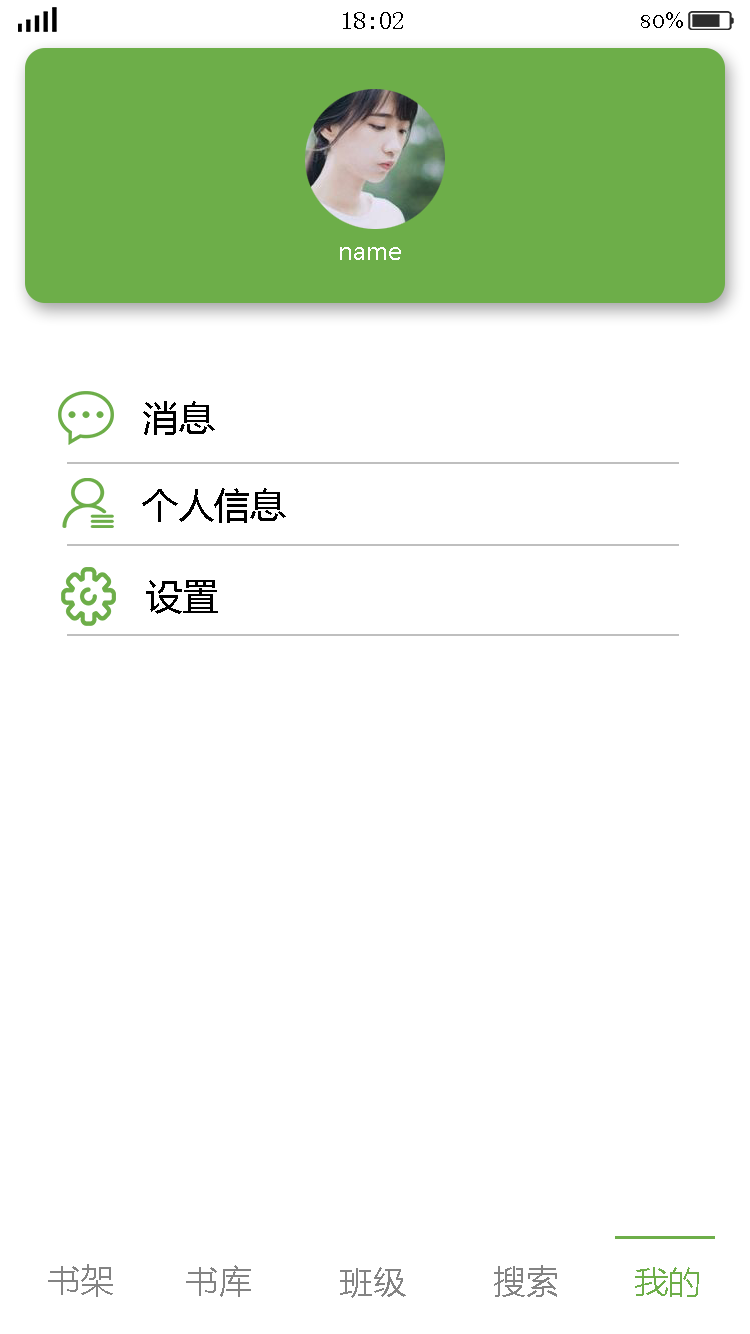
<style>
.page{position:relative;width:750px;height:1334px;background:#ffffff}
.page>*{position:absolute;margin:0}
.t1{font:25px "SimSun";color:#000000}
.t2{font:25px "BellMT";color:#000000}
.t3{font:24px "MicrosoftYaHei";color:#ffffff}
.t4{font:36px "MicrosoftYaHei";color:#000000}
.t5{font:33.3px "MicrosoftYaHei";color:#838383}
.t6{font:33.3px "MicrosoftYaHei";color:#6dae49}
</style>
<div class="page">
<p class="t1" style="left:343px;top:12px;width:60px;height:17px">18:02</p>
<p class="t2" style="left:641px;top:12px;width:42px;height:16px">80%</p>
<p class="t3" style="left:340px;top:247px;width:61px;height:13px">name</p>
<p class="t4" style="left:143px;top:401px;width:72px;height:34px">消息</p>
<p class="t4" style="left:142px;top:488px;width:144px;height:35px">个人信息</p>
<p class="t4" style="left:146px;top:580px;width:72px;height:34px">设置</p>
<p class="t5" style="left:48px;top:1264px;width:65px;height:33px">书架</p>
<p class="t5" style="left:186px;top:1265px;width:65px;height:32px">书库</p>
<p class="t5" style="left:494px;top:1265px;width:63px;height:32px">搜索</p>
<p class="t5" style="left:340px;top:1267px;width:66px;height:31px">班级</p>
<p class="t6" style="left:635px;top:1267px;width:64px;height:30px">我的</p>
</div>
